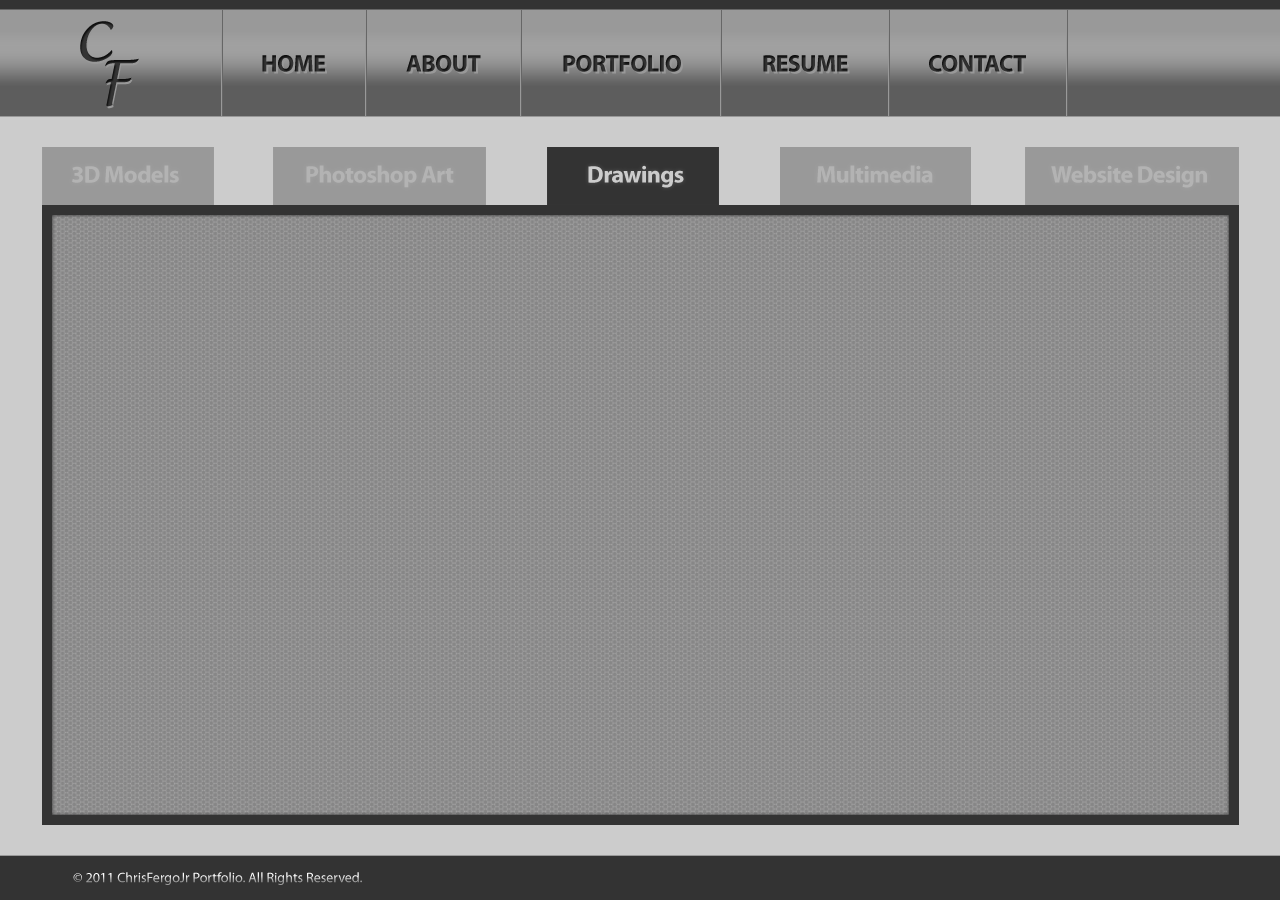
<style>
.page{position:relative;width:1280px;height:900px}
.page>*{position:absolute;margin:0}
.t1{font:24px "MyriadPro-Bold";letter-spacing:-0.025em;color:#282828}
.t2{font:24px "MyriadPro-Bold";letter-spacing:-0.025em;color:#262626}
.t3{font:24px "MyriadPro-Bold";letter-spacing:-0.025em;color:#b3b3b3}
.t4{font:24px "MyriadPro-Bold";letter-spacing:-0.025em;color:#cccccc}
.t5{font:14px "MyriadPro-Regular"}
</style>
<div class="page">
<p class="t1" style="left:262px;top:55px;width:63px;height:17px">HOME</p>
<p class="t1" style="left:406px;top:55px;width:75px;height:17px">ABOUT</p>
<p class="t2" style="left:563px;top:55px;width:118px;height:17px">PORTFOLIO</p>
<p class="t2" style="left:763px;top:55px;width:85px;height:17px">RESUME</p>
<p class="t2" style="left:929px;top:55px;width:97px;height:17px">CONTACT</p>
<p class="t3" style="left:72px;top:165px;width:107px;height:18px">3D Models</p>
<p class="t3" style="left:306px;top:165px;width:148px;height:23px">Photoshop Art</p>
<p class="t4" style="left:588px;top:165px;width:96px;height:23px">Drawings</p>
<p class="t3" style="left:817px;top:165px;width:116px;height:18px">Multimedia</p>
<p class="t3" style="left:1051px;top:165px;width:156px;height:23px">Website Design</p>
<p class="t5" style="left:73px;top:872px;width:289px;height:13px">© 2011 ChrisFergoJr Portfolio. All Rights Reserved.</p>
</div>
